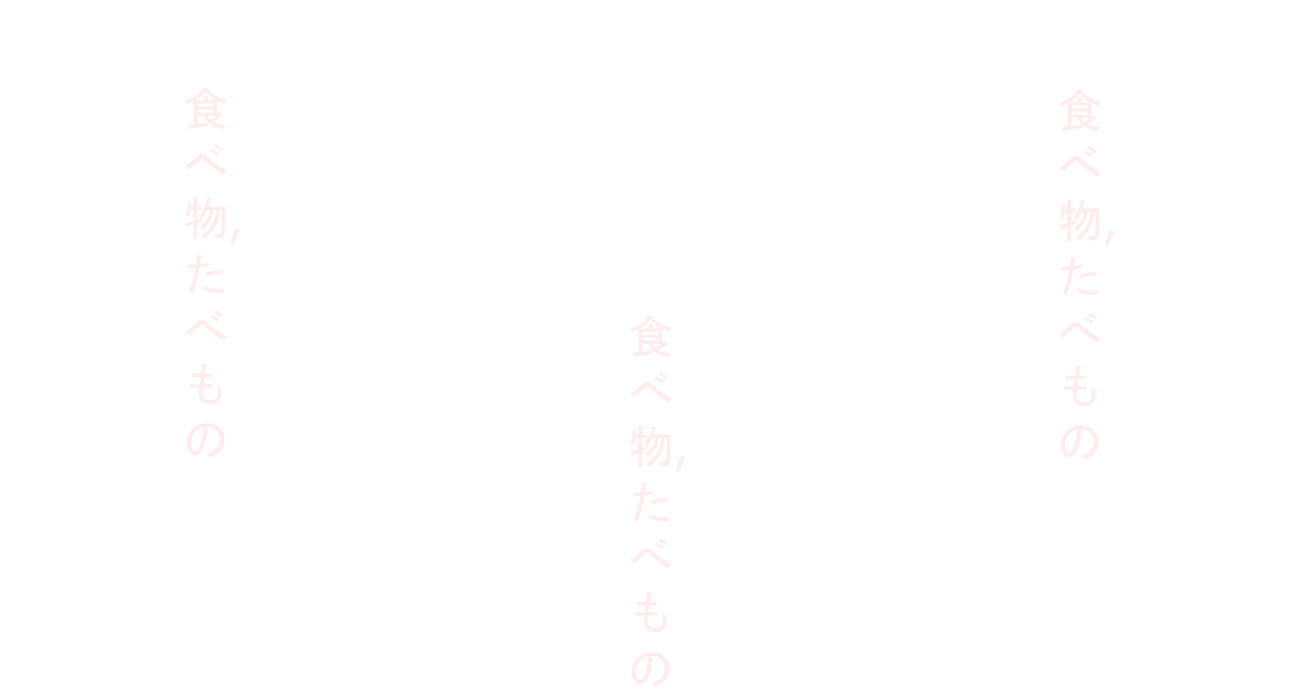
<style>
.page{position:relative;width:1300px;height:700px;background:#ffffff}
.page>*{position:absolute;margin:0}
.t1{font:46.1px "MS-Gothic";color:#ffffff}
.t2{font:46.1px "Tahoma";color:#ffffff}
</style>
<div class="page">
<p class="t1" style="left:185px;top:87px;width:56px;height:371px;opacity:0.11">食<br>べ<br>物<span class="t2">, <br></span>た<br>べ<br>も<br>の</p>
<p class="t1" style="left:1059px;top:89px;width:56px;height:371px;opacity:0.11">食<br>べ<br>物<span class="t2">, <br></span>た<br>べ<br>も<br>の</p>
<p class="t1" style="left:630px;top:315px;width:56px;height:372px;opacity:0.11">食<br>べ<br>物<span class="t2">, <br></span>た<br>べ<br>も<br>の</p>
</div>
